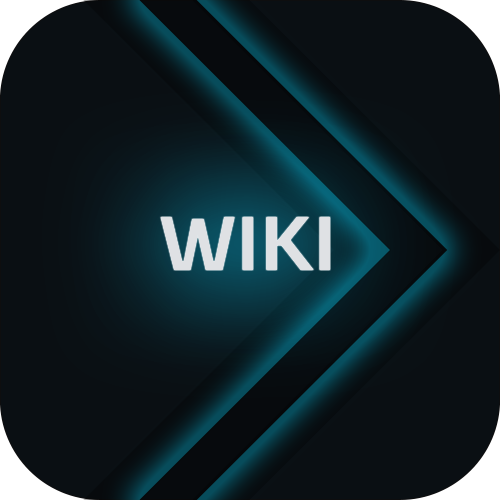
<style>
.page{position:relative;width:500px;height:500px;background:#0a0f13}
.page>*{position:absolute;margin:0}
.t1{font:72.8px "Sora-SemiBold";color:#dfe1e4}
</style>
<div class="page">
<p class="t1" style="left:160px;top:217px;width:170px;height:53px">WIKI</p>
</div>
